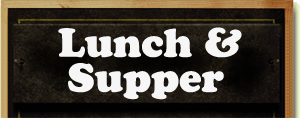
<style>
.page{position:relative;width:300px;height:118px}
.page>*{position:absolute;margin:0}
.t1{font:40px "CooperBlackStd";color:#ffffff}
</style>
<div class="page">
<p class="t1" style="left:58px;top:27px;width:184px;height:31px;opacity:0.96">Lunch &amp;</p>
<p class="t1" style="left:68px;top:63px;width:156px;height:37px;opacity:0.96">Supper</p>
</div>
